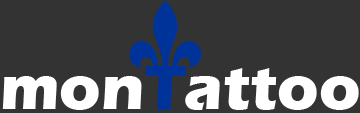
<style>
.page{position:relative;width:360px;height:113px;background:#333333}
.page>*{position:absolute;margin:0}
.t1{font:63.6px "ErasITC-Bold";color:#ffffff}
.t2{font:63.6px "ErasITC-Bold";color:#003399}
</style>
<div class="page">
<p class="t1" style="left:2px;top:66px;width:357px;height:44px">mon<span class="t2">T</span>attoo</p>
</div>
